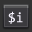
<style>
.page{position:relative;width:32px;height:32px;background:#3b3a3e}
.page>*{position:absolute;margin:0}
.t1{font:14.2px "Consolas";color:#f7f4ff}
</style>
<div class="page">
<p class="t1" style="left:8px;top:11px;width:15px;height:13px">$i</p>
</div>
